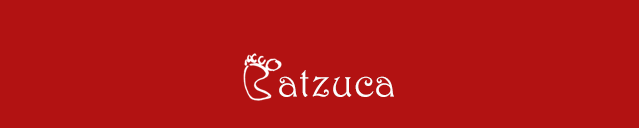
<style>
.page{position:relative;width:639px;height:128px;background:#b21212}
.page>*{position:absolute;margin:0}
.t1{font:41.3px "Harrington";color:#fdfdfd}
</style>
<div class="page">
<p class="t1" style="left:279px;top:70px;width:115px;height:27px">atzuca</p>
</div>
